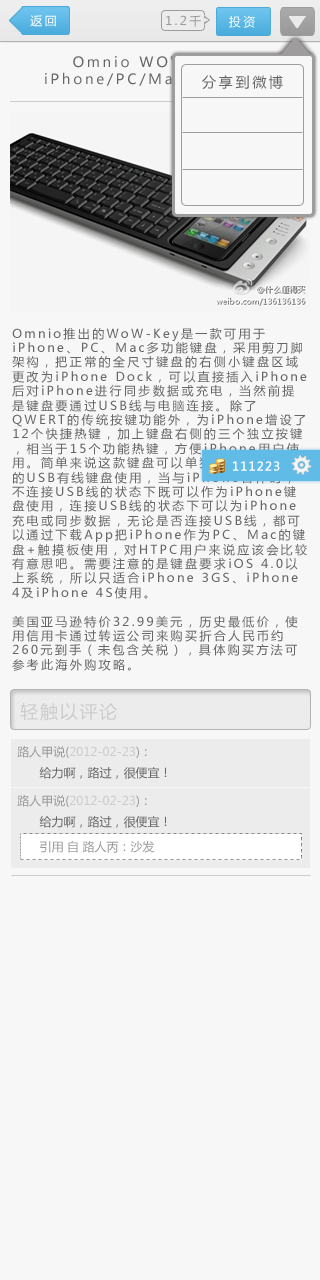
<style>
.page{position:relative;width:320px;height:1280px;background:#f7f7f7}
.page>*{position:absolute;margin:0}
.t1{font:12px "MicrosoftYaHei";letter-spacing:0.2em;color:#ffffff}
.t2{font:12px "MicrosoftYaHei";letter-spacing:0.2em;color:#999999}
.t3{font:14px "MicrosoftYaHei";letter-spacing:0.2em}
.t4{font:14px "MicrosoftYaHei";letter-spacing:0.2em;color:#666666}
.t5{font:12px "MicrosoftYaHei";letter-spacing:0.2em;color:#666666}
.t6{font:12px "MicrosoftYaHei";letter-spacing:0.1em;color:#ffffff}
.t7{font:18px "MicrosoftYaHei";letter-spacing:0.1em;color:#cccccc}
.t8{font:12px "MicrosoftYaHei";color:#cccccc}
.t9{font:12px "MicrosoftYaHei";color:#999999}
.t10{font:12px "MicrosoftYaHei";color:#666666}
</style>
<div class="page">
<p class="t1" style="left:30px;top:15px;width:26px;height:12px">返回</p>
<p class="t2" style="left:166px;top:15px;width:35px;height:12px">1.2千</p>
<p class="t1" style="left:229px;top:15px;width:26px;height:13px">投资</p>
<p class="t3" style="left:45px;top:56px;width:221px;height:30px;text-align:center">Omnio WOW-KEYS iPhone/PC/Mac多功能键盘</p>
<p class="t4" style="left:202px;top:75px;width:81px;height:14px">分享到微博</p>
<p class="t5" style="left:12px;top:328px;width:295px;height:343px">Omnio推出的WoW-Key是一款可用于iPhone、PC、Mac多功能键盘，采用剪刀脚架构，把正常的全尺寸键盘的右侧小键盘区域更改为iPhone Dock，可以直接插入iPhone后对iPhone进行同步数据或充电，当然前提是键盘要通过USB线与电脑连接。除了QWERT的传统按键功能外，为iPhone增设了12个快捷热键，加上键盘右侧的三个独立按键，相当于15个功能热键，方便iPhone用户使用。简单来说这款键盘可以单独作为PC、Mac的USB有线键盘使用，当与iPhone合体时，不连接USB线的状态下既可以作为iPhone键盘使用，连接USB线的状态下可以为iPhone充电或同步数据，无论是否连接USB线，都可以通过下载App把iPhone作为PC、Mac的键盘+触摸板使用，对HTPC用户来说应该会比较有意思吧。需要注意的是键盘要求iOS 4.0以上系统，所以只适合iPhone 3GS、iPhone 4及iPhone 4S使用。<br><br>美国亚马逊特价32.99美元，历史最低价，使用信用卡通过转运公司来购买折合人民币约260元到手（未包含关税），具体购买方法可参考此海外购攻略。</p>
<p class="t6" style="left:233px;top:461px;width:47px;height:10px">111223</p>
<p class="t7" style="left:20px;top:702px;width:98px;height:19px">轻触以评论</p>
<p class="t8" style="left:17px;top:746px;width:130px;height:12px"><span class="t9">路人甲说(</span>2012-02-23<span class="t9">)：</span></p>
<p class="t10" style="left:39px;top:767px;width:128px;height:12px">给力啊，路过，很便宜！</p>
<p class="t8" style="left:17px;top:795px;width:130px;height:12px"><span class="t9">路人甲说(</span>2012-02-23<span class="t9">)：</span></p>
<p class="t10" style="left:39px;top:816px;width:128px;height:12px">给力啊，路过，很便宜！</p>
<p class="t9" style="left:40px;top:841px;width:115px;height:12px">引用 自 路人丙：沙发</p>
</div>
